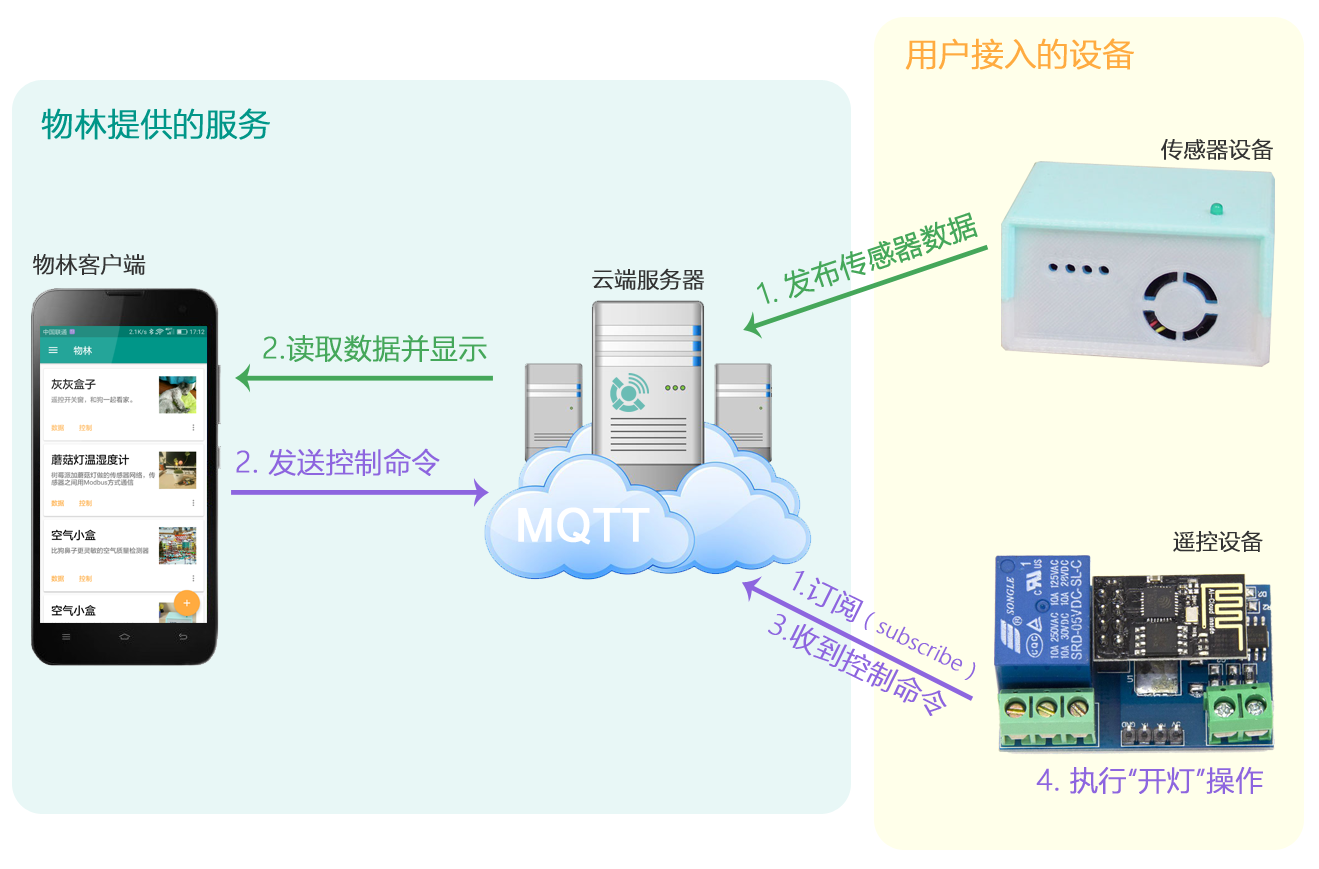
<style>
.page{position:relative;width:1319px;height:869px;background:#e8f7f6}
.page>*{position:absolute;margin:0}
.t1{font:32px "MicrosoftYaHeiLight";color:#ffab40;font-weight:bold}
.t2{font:32px "MicrosoftYaHeiLight";color:#009688;font-weight:bold}
.t3{font:22px "MicrosoftYaHeiLight";color:#333333;font-weight:bold}
.t4{font:28px "MicrosoftYaHeiLight";color:#45a75a;font-weight:bold}
.t5{font:28px "MicrosoftYaHeiLight";color:#8d65df;font-weight:bold}
.t6{font:46px "ArialMT";color:#ffffff;font-weight:bold}
.t7{font:21px/48px "MicrosoftYaHeiLight";color:#8d65df;font-weight:bold}
.t8{font:28px/48px "MicrosoftYaHeiLight";color:#8d65df;font-weight:bold}
</style>
<div class="page">
<p class="t1" style="left:905px;top:38px;width:229px;height:32px">用户接入的设备</p>
<p class="t2" style="left:41px;top:108px;width:229px;height:32px">物林提供的服务</p>
<p class="t3" style="left:1161px;top:138px;width:112px;height:22px">传感器设备</p>
<p class="t4" style="left:757px;top:212px;width:221px;height:92px;rotate:-19deg">1. 发布传感器数据</p>
<p class="t3" style="left:33px;top:253px;width:113px;height:22px">物林客户端</p>
<p class="t3" style="left:592px;top:268px;width:112px;height:22px">云端服务器</p>
<p class="t4" style="left:263px;top:334px;width:224px;height:28px">2.读取数据并显示</p>
<p class="t5" style="left:236px;top:448px;width:204px;height:28px">2. 发送控制命令</p>
<p class="t6" style="left:518px;top:507px;width:132px;height:38px">MQTT</p>
<p class="t3" style="left:1173px;top:530px;width:90px;height:22px">遥控设备</p>
<p class="t7" style="left:768px;top:571px;width:208px;height:145px;rotate:26deg"><span class="t8">1.订阅</span>（subscribe）<br><span class="t8">3.收到控制命令</span></p>
<p class="t5" style="left:1036px;top:767px;width:227px;height:27px">4. 执行“开灯”操作</p>
</div>
